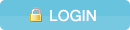
<style>
.page{position:relative;width:130px;height:30px;background:#68c3de}
.page>*{position:absolute;margin:0}
.t1{font:17px "Latha";color:#ffffff}
</style>
<div class="page">
<p class="t1" style="left:50px;top:9px;width:46px;height:13px">LOGIN</p>
</div>
